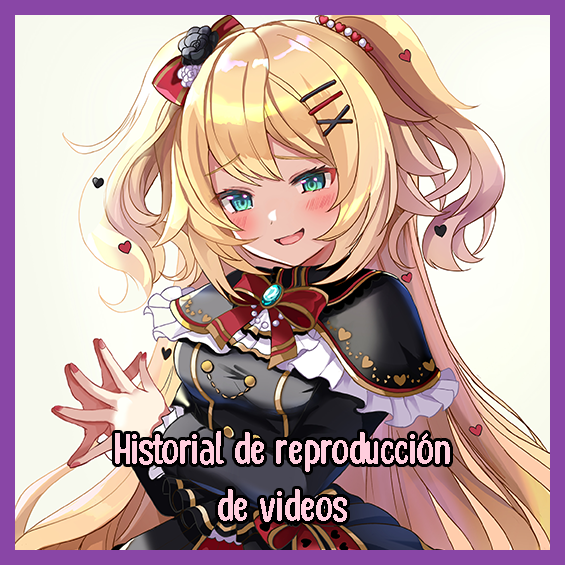
<style>
.page{position:relative;width:565px;height:565px}
.page>*{position:absolute;margin:0}
.t1{font:47.5px "HoneyNotes-Regular";color:#ffcddd}
</style>
<div class="page">
<p class="t1" style="left:115px;top:431px;width:335px;height:91px;text-align:center">Historial de reproducción<br>de videos</p>
</div>
